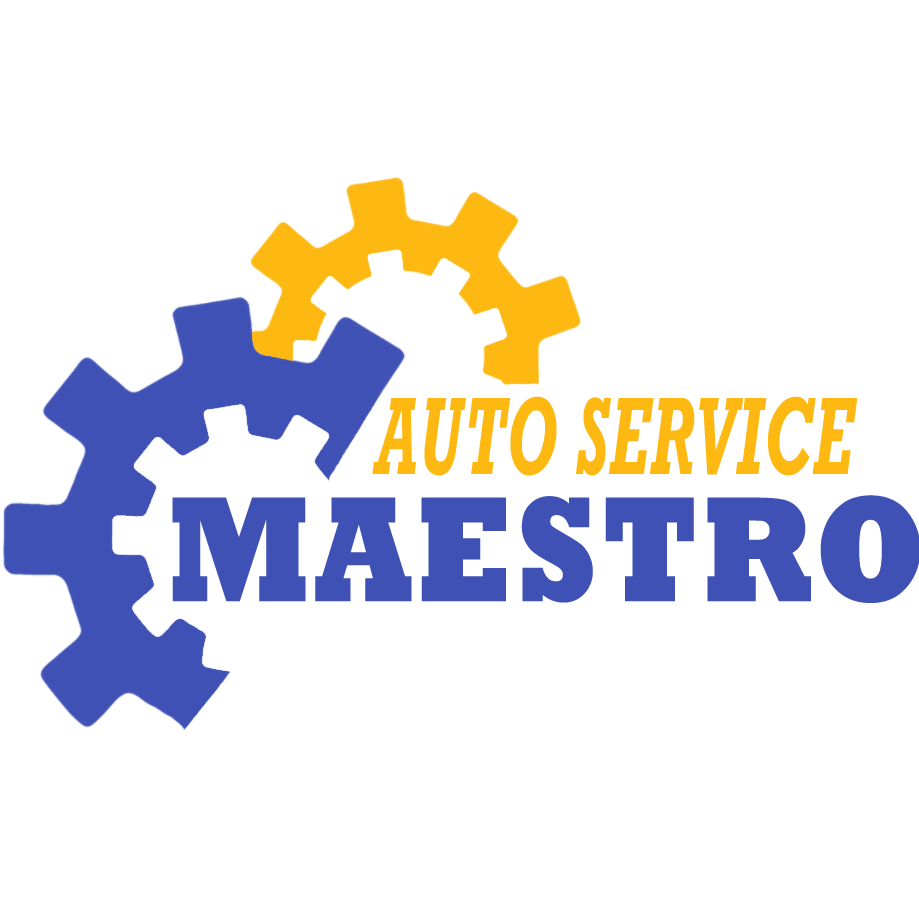
<style>
.page{position:relative;width:919px;height:919px;background:#ffffff}
.page>*{position:absolute;margin:0}
.t1{font:111.9px "RockwellMT-BoldItalic";letter-spacing:0.025em;color:#fdb812;scale:0.56 1}
.t2{font:152.5px "Rockwell-ExtraBold";letter-spacing:0.025em;color:#3f51b5;scale:0.85 1}
</style>
<div class="page">
<p class="t1" style="left:372px;top:396px;width:486px;height:80px">AUTO SERVICE</p>
<p class="t2" style="left:172px;top:495px;width:749px;height:108px">MAESTRO</p>
</div>
